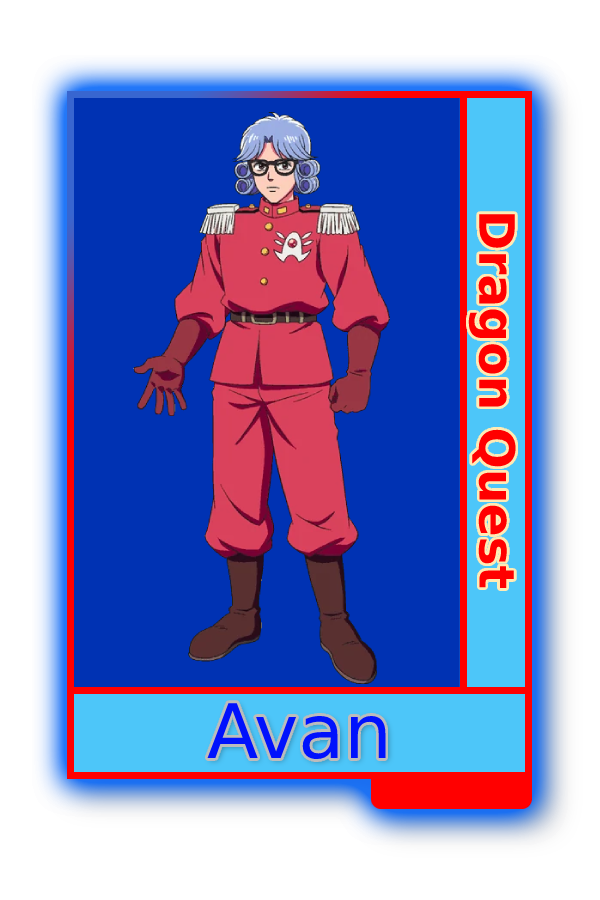
<style>
.page{position:relative;width:600px;height:900px;background:#0032b3}
.page>*{position:absolute;margin:0}
.t1{font:48.8px "MADETOMMY-Bold";color:#ff0000}
.t2{font:75px "CoolveticaRg-Regular";color:#0011fd}
</style>
<div class="page">
<p class="t1" style="left:468px;top:214px;width:48px;height:374px;rotate:90deg">Dragon Quest</p>
<p class="t2" style="left:207px;top:703px;width:179px;height:57px">Avan</p>
</div>
